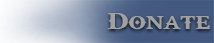
<style>
.page{position:relative;width:214px;height:43px}
.page>*{position:absolute;margin:0}
.t1{font:26px "GodOfWar";color:#a1a1a1}
</style>
<div class="page">
<p class="t1" style="left:107px;top:13px;width:103px;height:16px">Donate</p>
</div>
